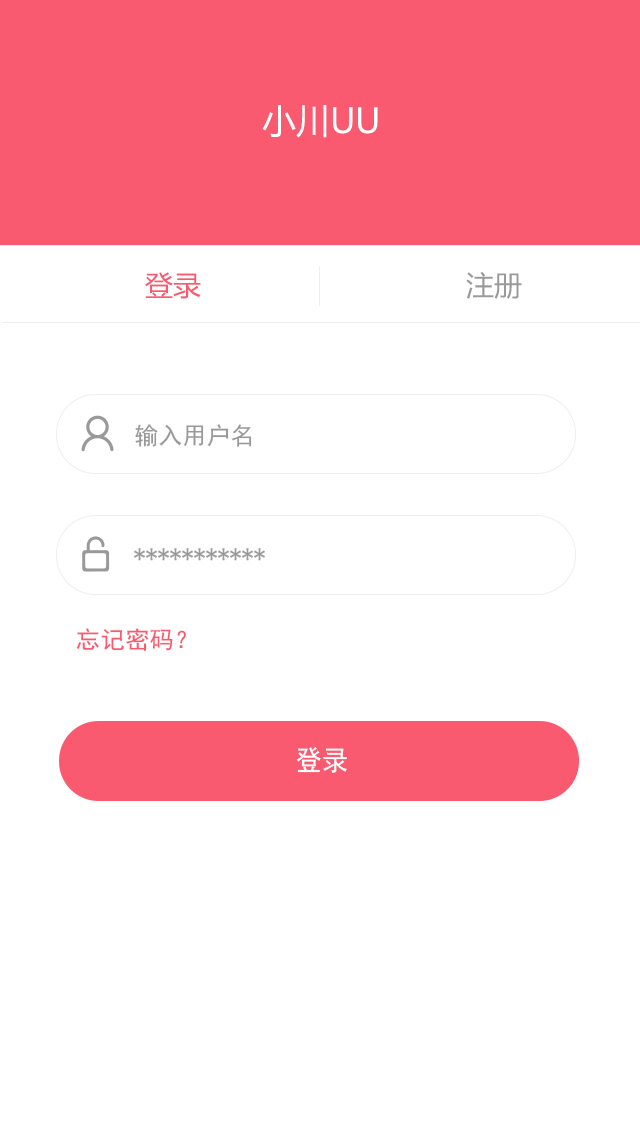
<style>
.page{position:relative;width:640px;height:1136px;background:#ffffff}
.page>*{position:absolute;margin:0}
.t1{font:34px "MicrosoftYaHei";color:#ffffff}
.t2{font:28px "MicrosoftYaHei";color:#f95a70}
.t3{font:28px "MicrosoftYaHei";color:#999999}
.t4{font:24px "SimHei";color:#999999}
.t5{font:24px "SimHei";color:#f95a70}
.t6{font:28px "SimHei";color:#ffffff;scale:0.94 1}
</style>
<div class="page">
<p class="t1" style="left:262px;top:105px;width:116px;height:33px">小川UU</p>
<p class="t2" style="left:145px;top:272px;width:56px;height:27px">登录</p>
<p class="t3" style="left:466px;top:271px;width:56px;height:28px">注册</p>
<p class="t4" style="left:135px;top:424px;width:117px;height:23px">输入用户名</p>
<p class="t4" style="left:134px;top:548px;width:131px;height:13px">***********</p>
<p class="t5" style="left:76px;top:628px;width:110px;height:23px">忘记密码？</p>
<p class="t6" style="left:296px;top:747px;width:51px;height:26px">登录</p>
</div>
